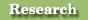
<style>
.page{position:relative;width:88px;height:20px;background:#9dbe6f}
.page>*{position:absolute;margin:0}
.t1{font:14px "NewCenturySchlbk-Bold";color:#ffffff}
</style>
<div class="page">
<p class="t1" style="left:9px;top:3px;width:68px;height:12px">Research</p>
</div>
